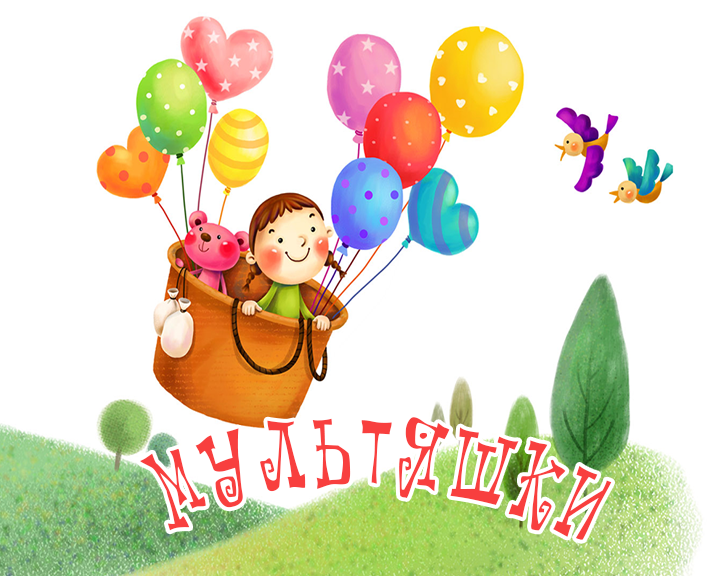
<style>
.page{position:relative;width:720px;height:576px;background:#ffffff}
.page>*{position:absolute;margin:0}
.t1{font:96.2px "KotLeopold";letter-spacing:0.1em;color:#f83f3e;scale:0.73 1}
</style>
<div class="page">
<p class="t1" style="left:140px;top:417px;width:472px;height:123px;rotate:3deg">МУЛЬТЯШКИ</p>
</div>
